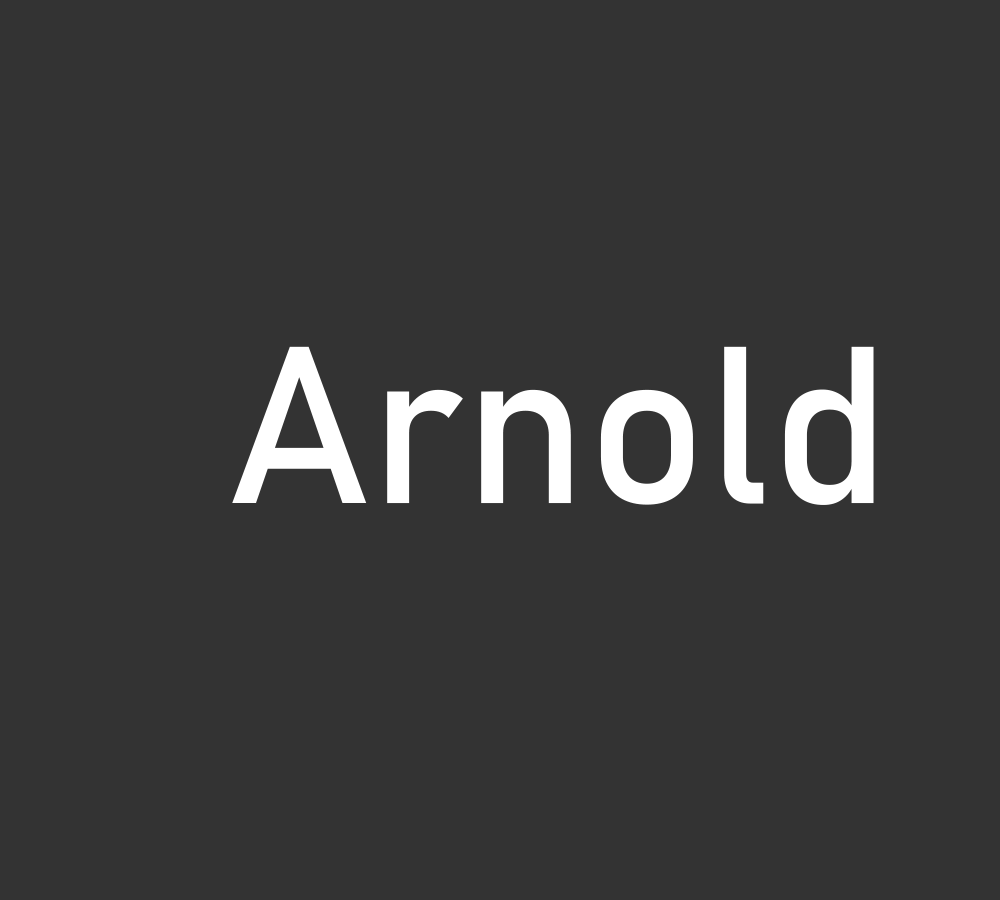
<style>
.page{position:relative;width:1000px;height:900px;background:#333333}
.page>*{position:absolute;margin:0}
.t1{font:220px "Bahnschrift";color:#ffffff}
</style>
<div class="page">
<p class="t1" style="left:232px;top:346px;width:642px;height:159px">Arnold</p>
</div>
